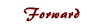
<style>
.page{position:relative;width:102px;height:26px;background:#ffffff}
.page>*{position:absolute;margin:0}
.t1{font:14px "Brush445BT-Regular";letter-spacing:0.05em;color:#660000}
</style>
<div class="page">
<p class="t1" style="left:23px;top:7px;width:57px;height:15px">Forward</p>
</div>
